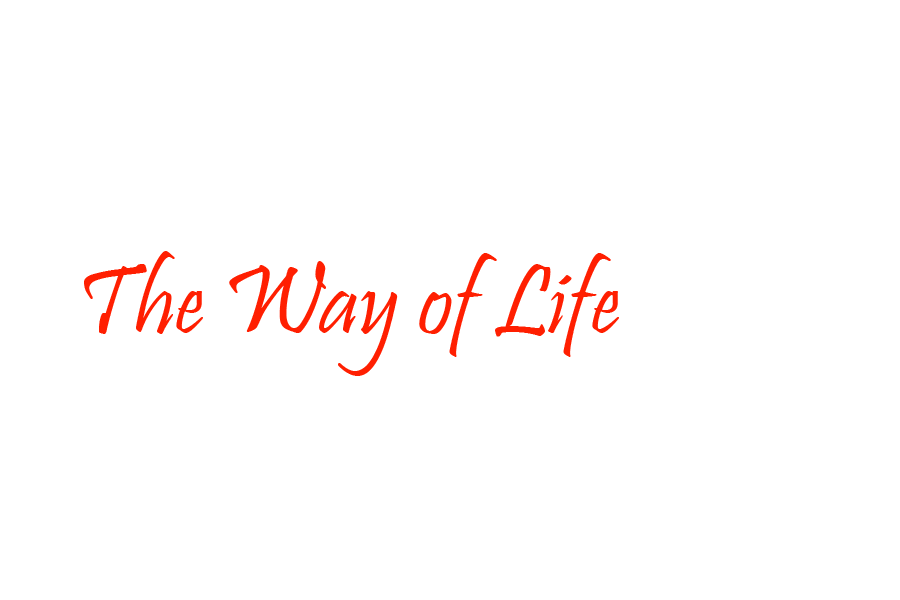
<style>
.page{position:relative;width:900px;height:600px;background:#ffffff}
.page>*{position:absolute;margin:0}
.t1{font:100px "Pristina-Regular";color:#ff1f01}
</style>
<div class="page">
<p class="t1" style="left:84px;top:251px;width:535px;height:125px">The Way of Life</p>
</div>
